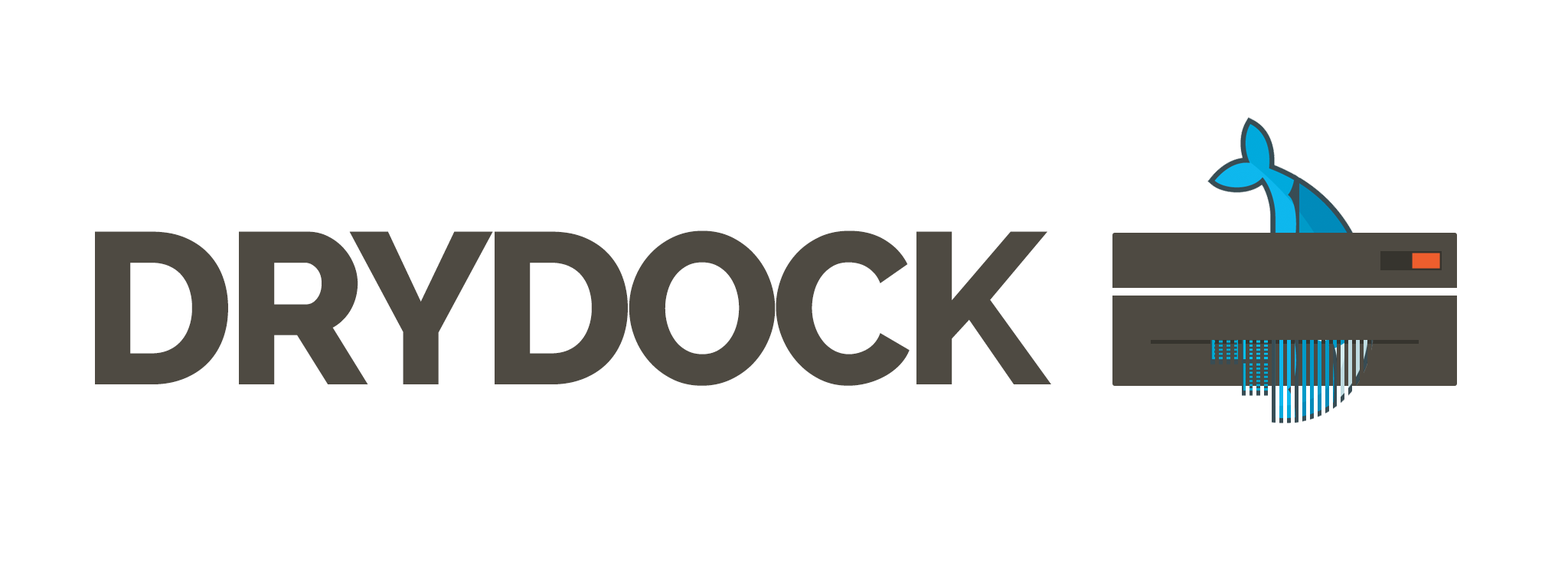
<style>
.page{position:relative;width:1568px;height:588px;background:#ffffff}
.page>*{position:absolute;margin:0}
.t1{font:214.9px "Raleway-ExtraBold";letter-spacing:-0.05em;color:#4e4a42}
</style>
<div class="page">
<p class="t1" style="left:95px;top:230px;width:956px;height:156px">DRYDOCK</p>
</div>
